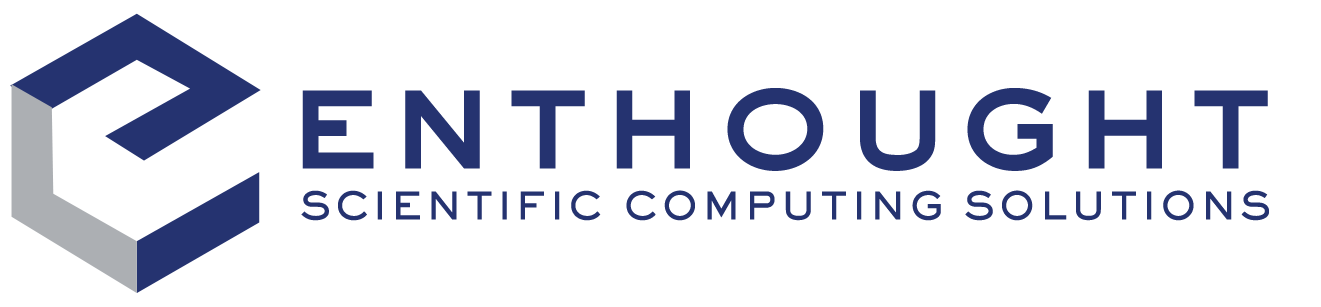
<style>
.page{position:relative;width:1321px;height:307px;background:#ffffff}
.page>*{position:absolute;margin:0}
.t1{font:150px "SackersGothicStd-Heavy";color:#253370}
.t2{font:37.5px "SackersGothicStd-Heavy";letter-spacing:0.09em;color:#253370}
</style>
<div class="page">
<p class="t1" style="left:302px;top:88px;width:966px;height:83px">enthought</p>
<p class="t2" style="left:301px;top:190px;width:968px;height:31px">SCIENTIFIC COMPUTING SOLUTIONS</p>
</div>
